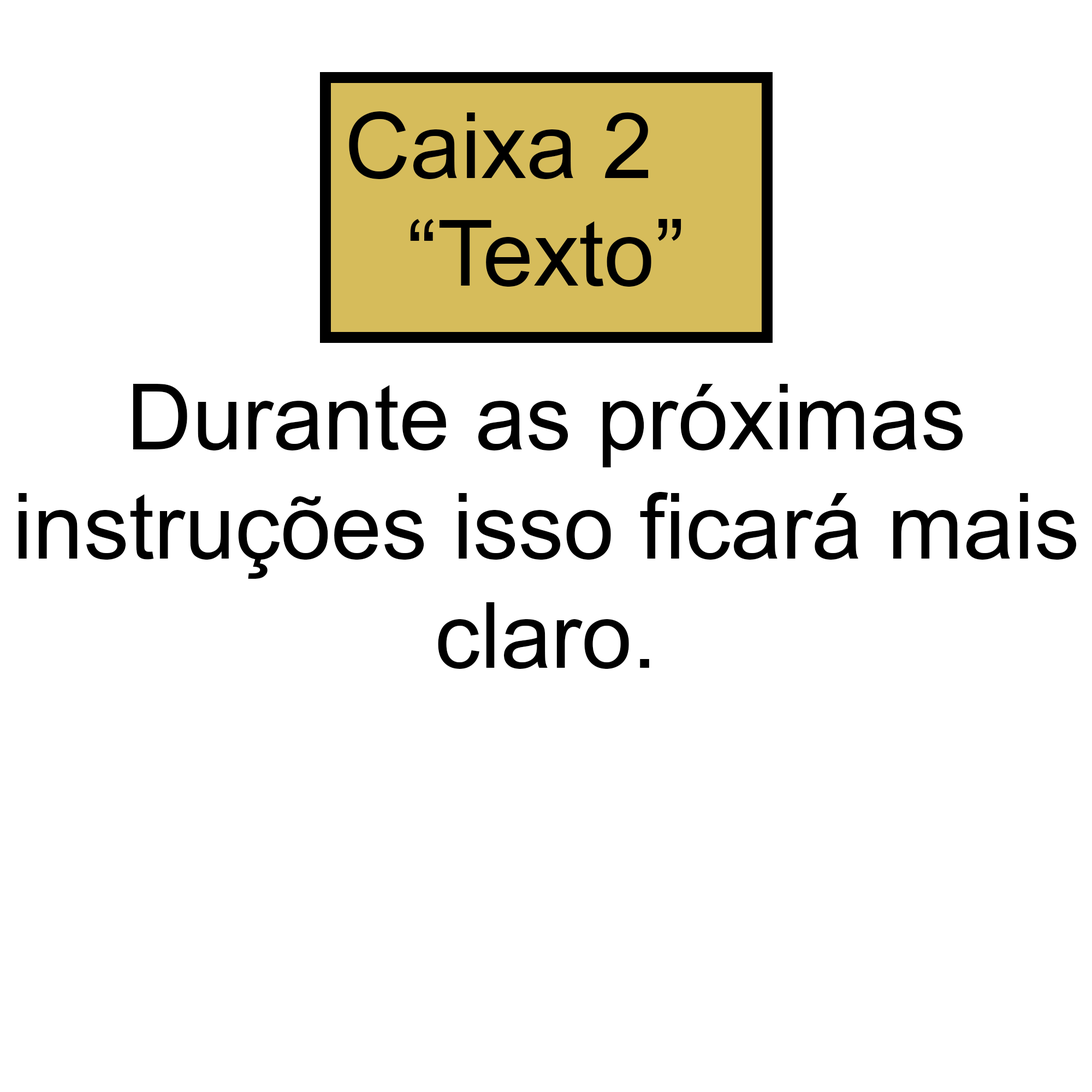
<style>
.page{position:relative;width:1092px;height:1092px;background:#ffffff}
.page>*{position:absolute;margin:0}
.t1{font:91px "ArialMT";color:#000000}
</style>
<div class="page">
<p class="t1" style="left:349px;top:111px;width:300px;height:68px">Caixa 2</p>
<p class="t1" style="left:410px;top:219px;width:271px;height:68px">“Texto”</p>
<p class="t1" style="left:19px;top:384px;width:1058px;height:285px;text-align:center">Durante as próximas<br>instruções isso ficará mais<br>claro.</p>
</div>
